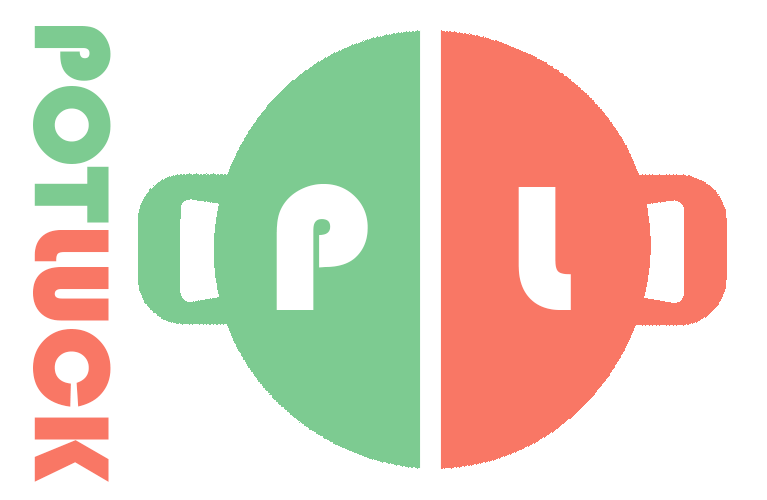
<style>
.page{position:relative;width:767px;height:500px;background:#ffffff}
.page>*{position:absolute;margin:0}
.t1{font:79.7px "Bauhaus93";color:#f97765}
.t2{font:79.7px "Bauhaus93";color:#7dcb91}
.t3{font:132.2px "Bauhaus93";color:#ffffff}
</style>
<div class="page">
<p class="t1" style="left:33px;top:26px;width:78px;height:456px;rotate:90deg"><span class="t2">POT</span>LUCK</p>
<p class="t3" style="left:276px;top:184px;width:295px;height:126px">P   L</p>
</div>
